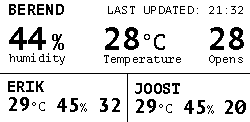
<style>
.page{position:relative;width:250px;height:122px;background:#ffffff}
.page>*{position:absolute;margin:0}
.t1{font:15px "PTMono-Bold";letter-spacing:0.02em;color:#000000}
.t2{font:12px "PTMono-Regular";letter-spacing:0.02em;color:#000000}
.t3{font:31.7px "PTMono-Bold";letter-spacing:0.02em;color:#000000}
.t4{font:22px "PTMono-Regular";letter-spacing:0.02em;color:#000000}
.t5{font:19px "PTMono-Bold";letter-spacing:0.02em;color:#000000}
.t6{font:13.2px "PTMono-Regular";letter-spacing:0.02em;color:#000000}
</style>
<div class="page">
<p class="t1" style="left:9px;top:4px;width:55px;height:11px">BEREND</p>
<p class="t2" style="left:108px;top:6px;width:135px;height:8px">LAST UPDATED:VVVT 21:32</p>
<p class="t3" style="left:9px;top:27px;width:37px;height:23px">44</p>
<p class="t3" style="left:105px;top:27px;width:34px;height:23px">28</p>
<p class="t3" style="left:210px;top:27px;width:34px;height:23px">28</p>
<p class="t4" style="left:52px;top:34px;width:12px;height:16px">%</p>
<p class="t4" style="left:144px;top:34px;width:21px;height:16px">°C</p>
<p class="t2" style="left:9px;top:53px;width:56px;height:12px">humidity</p>
<p class="t2" style="left:104px;top:55px;width:77px;height:11px">Temperature</p>
<p class="t2" style="left:209px;top:55px;width:34px;height:11px">Opens</p>
<p class="t1" style="left:8px;top:81px;width:36px;height:11px">ERIK</p>
<p class="t1" style="left:135px;top:83px;width:45px;height:11px">JOOST</p>
<p class="t5" style="left:9px;top:97px;width:20px;height:14px">29</p>
<p class="t6" style="left:32px;top:102px;width:13px;height:9px">°C</p>
<p class="t5" style="left:57px;top:98px;width:21px;height:14px">45</p>
<p class="t5" style="left:100px;top:98px;width:20px;height:14px">32</p>
<p class="t5" style="left:136px;top:99px;width:20px;height:14px">29</p>
<p class="t5" style="left:184px;top:100px;width:21px;height:14px">45</p>
<p class="t5" style="left:225px;top:100px;width:21px;height:14px">20</p>
<p class="t6" style="left:80px;top:103px;width:7px;height:9px">%</p>
<p class="t6" style="left:159px;top:104px;width:13px;height:9px">°C</p>
<p class="t6" style="left:207px;top:105px;width:7px;height:9px">%</p>
</div>
